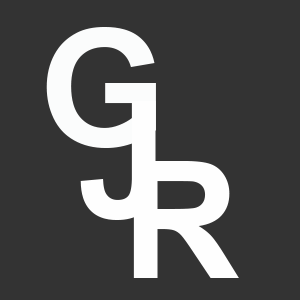
<style>
.page{position:relative;width:300px;height:300px;background:#333333}
.page>*{position:absolute;margin:0}
.t1{font:163.2px "Arial-BoldMT";color:#fbfcfc}
.t2{font:163.2px "Arial-BoldMT";color:#fefefe}
</style>
<div class="page">
<p class="t1" style="left:46px;top:27px;width:110px;height:121px">G</p>
<p class="t2" style="left:80px;top:101px;width:76px;height:119px">J</p>
<p class="t2" style="left:133px;top:161px;width:106px;height:117px">R</p>
</div>
